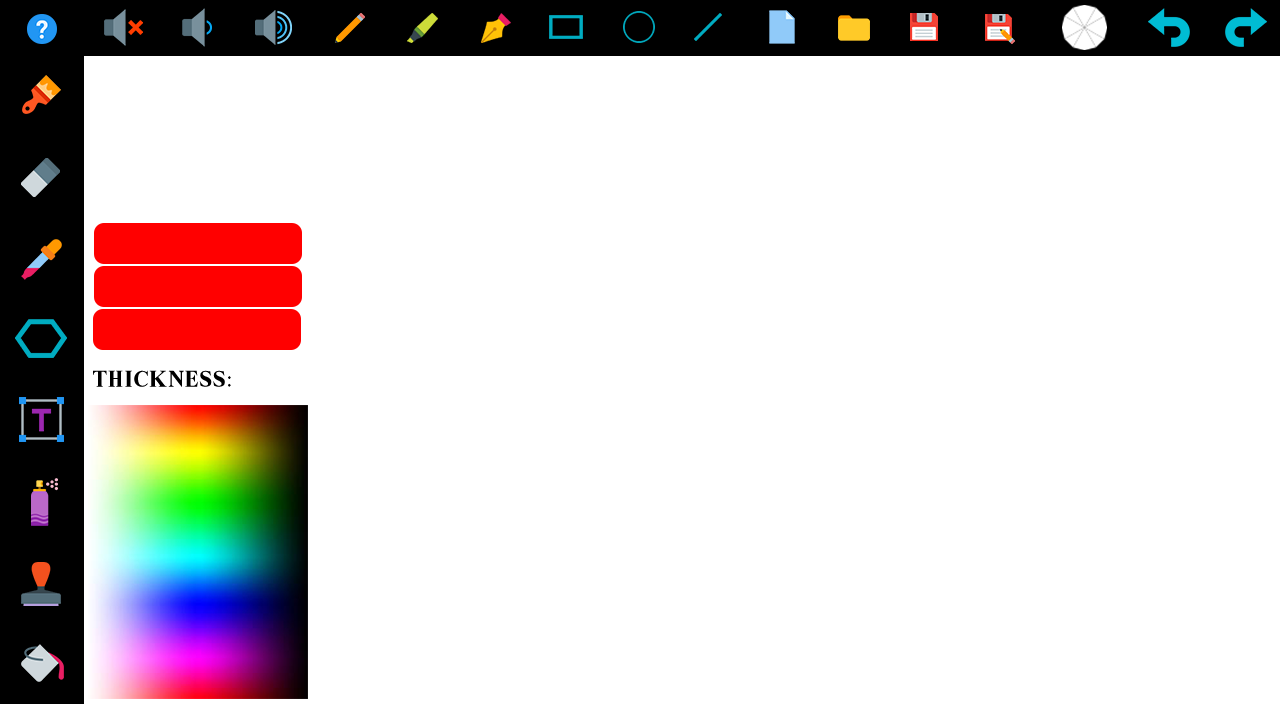
<style>
.page{position:relative;width:1280px;height:720px;background:#ffffff}
.page>*{position:absolute;margin:0}
.t1{font:22.8px "SuperSmash4.1";color:#000000}
</style>
<div class="page">
<p class="t1" style="left:93px;top:370px;width:138px;height:17px">THICKness:</p>
</div>
